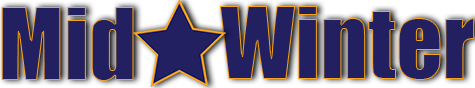
<style>
.page{position:relative;width:475px;height:88px;background:#222060}
.page>*{position:absolute;margin:0}
.t1{font:91.7px "Impact";color:#222060}
</style>
<div class="page">
<p class="t1" style="left:219px;top:6px;width:256px;height:74px">Winter</p>
<p class="t1" style="left:1px;top:7px;width:133px;height:74px">Mid</p>
</div>
